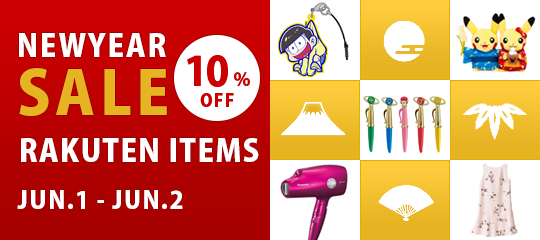
<style>
.page{position:relative;width:540px;height:240px;background:#ffffff}
.page>*{position:absolute;margin:0}
.t1{font:30px "KozGoPr6N-Heavy";letter-spacing:0.06em;color:#ffffff}
.t2{font:18px/40px "KozGoPr6N-Heavy";letter-spacing:0.06em;color:#cc0000}
.t3{font:40px/40px "KozGoPr6N-Heavy";letter-spacing:-0.02em;color:#cc0000}
.t4{font:40px/40px "KozGoPr6N-Heavy";letter-spacing:0.1em;color:#cc0000}
.t5{font:18px/40px "KozGoPr6N-Heavy";letter-spacing:0.1em;color:#cc0000}
.t6{font:60px "KozGoPr6N-Heavy";letter-spacing:0.08em;color:#e6b422}
.t7{font:30px "KozGoPr6N-Heavy";letter-spacing:0.04em;color:#ffffff}
.t8{font:24px "KozGoPr6N-Heavy";letter-spacing:0.06em;color:#ffffff}
</style>
<div class="page">
<p class="t1" style="left:19px;top:33px;width:147px;height:24px">NEWYEAR</p>
<p class="t2" style="left:187px;top:55px;width:63px;height:52px;text-align:center"><span class="t3">1</span><span class="t4">0</span><span class="t5">%<br></span>OFF</p>
<p class="t2" style="left:187px;top:55px;width:63px;height:52px;text-align:center"><span class="t3">1</span><span class="t4">0</span><span class="t5">%<br></span>OFF</p>
<p class="t6" style="left:19px;top:68px;width:148px;height:48px">SALE</p>
<p class="t7" style="left:21px;top:138px;width:238px;height:24px">RAKUTEN ITEMS</p>
<p class="t8" style="left:17px;top:190px;width:166px;height:19px">JUN.1 - JUN.2</p>
</div>
